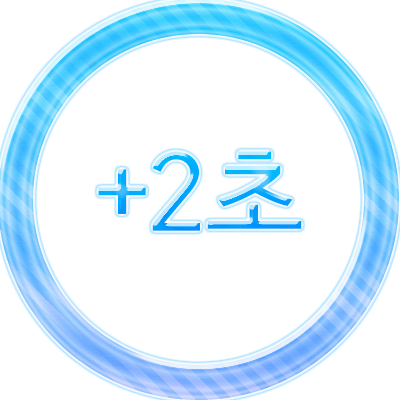
<style>
.page{position:relative;width:400px;height:400px;background:#ffffff}
.page>*{position:absolute;margin:0}
.t1{font:105px "HCRDotum";letter-spacing:-0.05em;font-weight:bold}
</style>
<div class="page">
<p class="t1" style="left:98px;top:151px;width:204px;height:80px">+2초</p>
</div>
